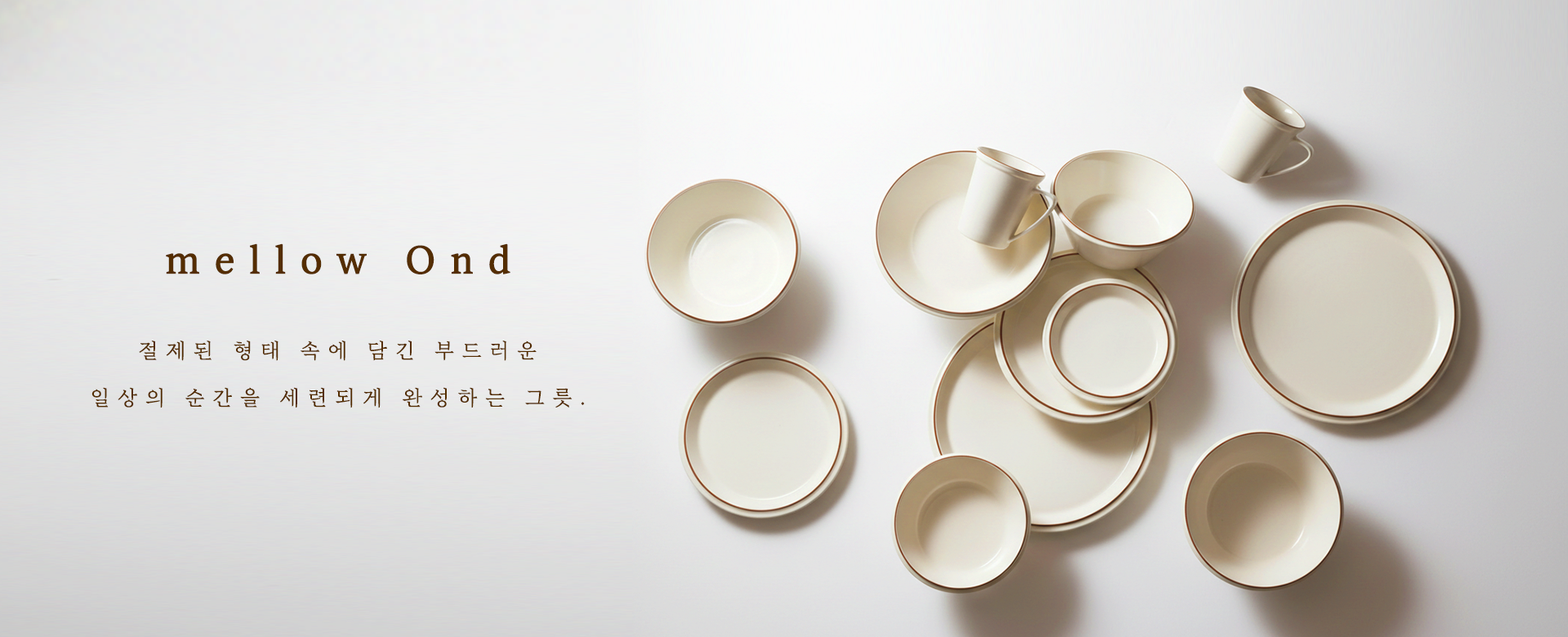
<style>
.page{position:relative;width:1568px;height:637px}
.page>*{position:absolute;margin:0}
.t1{font:40.8px "Eulyoo1945-SemiBold";letter-spacing:0.345em;color:#542d00}
.t2{font:21.1px "Eulyoo1945-Regular";letter-spacing:0.345em;color:#542d00}
.t3{font:21.1px "Eulyoo1945-SemiBold";letter-spacing:0.345em;color:#542d00}
</style>
<div class="page">
<p class="t1" style="left:166px;top:243px;width:344px;height:31px">mellow Ond</p>
<p class="t2" style="left:139px;top:341px;width:398px;height:20px">절제된 형태 속에 담긴 부드러운</p>
<p class="t2" style="left:91px;top:387px;width:494px;height:21px">일상의 순간을 세련되게 완성하는 그릇<span class="t3">.</span></p>
</div>
